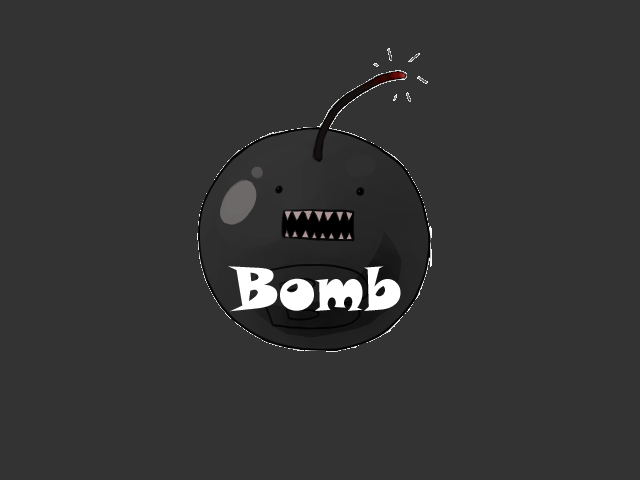
<style>
.page{position:relative;width:640px;height:480px;background:#333333}
.page>*{position:absolute;margin:0}
.t1{font:60px "SnapITC-Regular";color:#ffffff}
</style>
<div class="page">
<p class="t1" style="left:228px;top:266px;width:173px;height:46px">Bomb</p>
</div>
